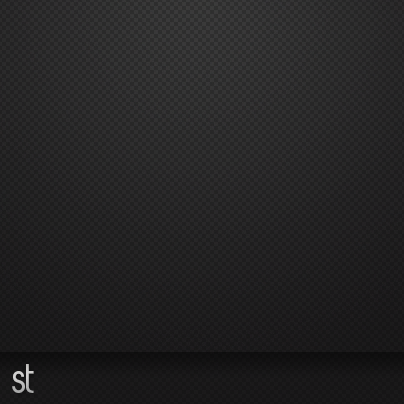
<style>
.page{position:relative;width:404px;height:404px}
.page>*{position:absolute;margin:0}
.t1{font:36px "AbeatbyKai";letter-spacing:-0.05em;color:#c5c4c3}
</style>
<div class="page">
<p class="t1" style="left:12px;top:364px;width:22px;height:29px">st</p>
</div>
